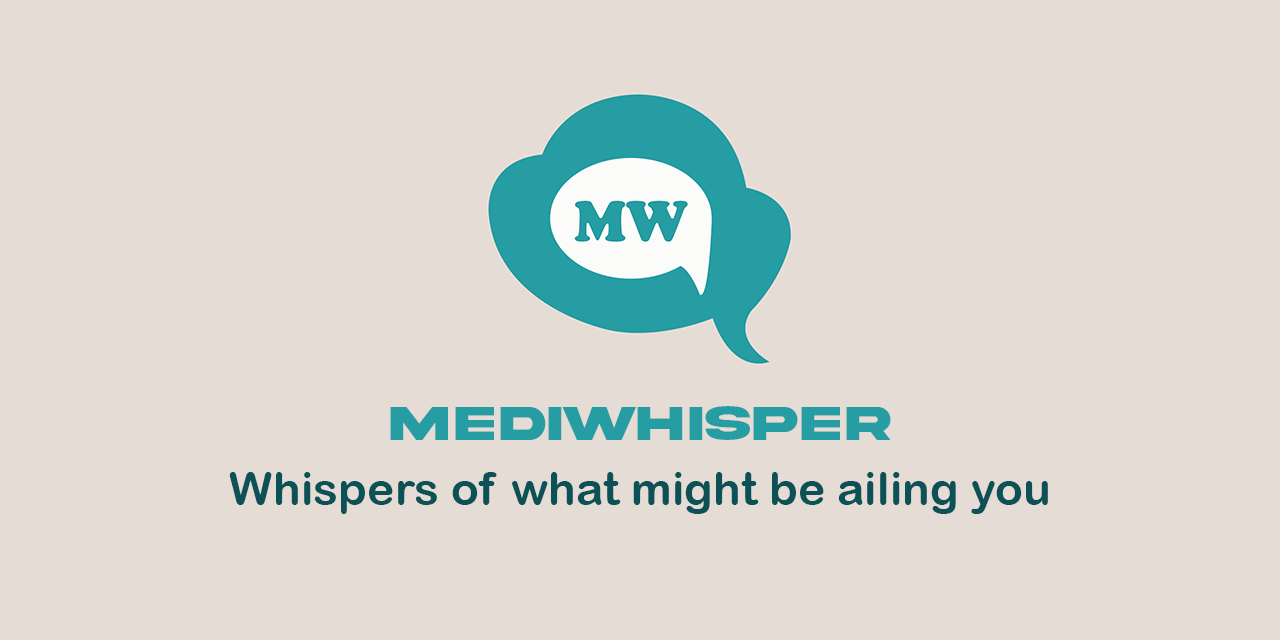
<style>
.page{position:relative;width:1280px;height:640px;background:#e5dcd5}
.page>*{position:absolute;margin:0}
.t1{font:50px "AkiraExpanded-SuperBold";color:#269da3}
.t2{font:46.3px "ArialRoundedMTBold";color:#0c5155}
</style>
<div class="page">
<p class="t1" style="left:390px;top:406px;width:501px;height:34px">MEDIWHISPER</p>
<p class="t2" style="left:229px;top:472px;width:819px;height:42px">Whispers of what might be ailing you</p>
</div>
